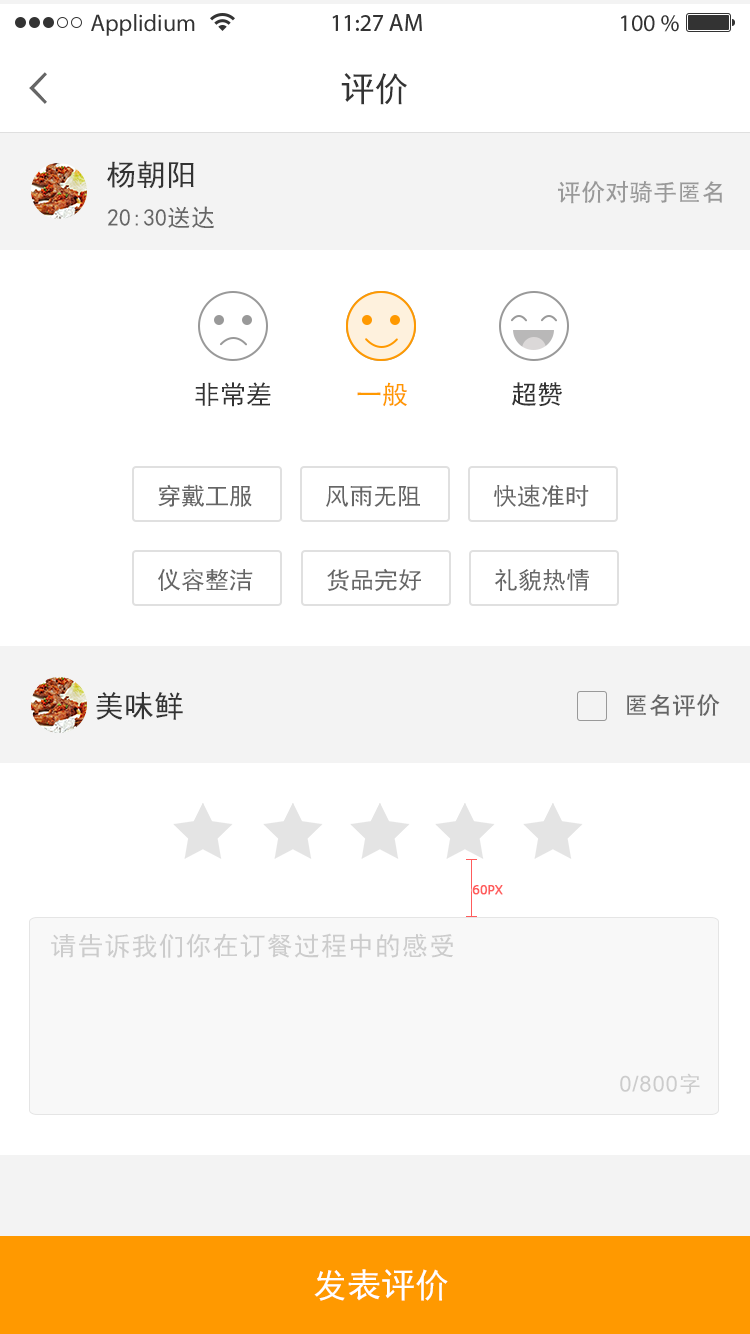
<style>
.page{position:relative;width:750px;height:1334px;background:#ffffff}
.page>*{position:absolute;margin:0}
.t1{font:24px "MyriadPro-Regular";color:#333333}
.t2{font:34px "SimHei";color:#333333}
.t3{font:29.9px "SimHei";color:#333333}
.t4{font:24px "AdobeHeitiStd-Regular";color:#999999}
.t5{font:23.9px "SimHei";color:#666666}
.t6{font:26px "SimHei";color:#333333}
.t7{font:26px "SimHei";color:#ff9900}
.t8{font:24px "SimHei";color:#666666}
.t9{font:30px "SimHei";color:#333333}
.t10{font:24px "AdobeHeitiStd-Regular";color:#666666}
.t11{font:12px "Verdana";color:#ff5c5c;font-weight:bold}
.t12{font:26px "SimHei";letter-spacing:0.04em;color:#cccccc}
.t13{font:22px "ArialMT";letter-spacing:0.04em;color:#cccccc}
.t14{font:22px "SimHei";letter-spacing:0.04em;color:#cccccc}
.t15{font:34px "SimHei";color:#ffffff}
</style>
<div class="page">
<p class="t1" style="left:91px;top:14px;width:104px;height:22px">Applidium</p>
<p class="t1" style="left:332px;top:14px;width:90px;height:17px">11:27 AM</p>
<p class="t1" style="left:621px;top:15px;width:58px;height:17px">100 %</p>
<p class="t2" style="left:341px;top:73px;width:66px;height:32px">评价</p>
<p class="t3" style="left:107px;top:161px;width:87px;height:28px">杨朝阳</p>
<p class="t4" style="left:558px;top:180px;width:164px;height:24px">评价对骑手匿名</p>
<p class="t5" style="left:107px;top:206px;width:107px;height:22px">20:30送达</p>
<p class="t6" style="left:195px;top:382px;width:76px;height:25px">非常差</p>
<p class="t7" style="left:357px;top:382px;width:50px;height:25px">一般</p>
<p class="t6" style="left:511px;top:382px;width:51px;height:25px">超赞</p>
<p class="t8" style="left:158px;top:484px;width:94px;height:23px">穿戴工服</p>
<p class="t8" style="left:326px;top:486px;width:94px;height:21px">风雨无阻</p>
<p class="t8" style="left:493px;top:484px;width:96px;height:23px">快速准时</p>
<p class="t8" style="left:158px;top:568px;width:95px;height:23px">仪容整洁</p>
<p class="t8" style="left:327px;top:568px;width:94px;height:24px">货品完好</p>
<p class="t8" style="left:494px;top:568px;width:95px;height:23px">礼貌热情</p>
<p class="t9" style="left:96px;top:692px;width:87px;height:28px">美味鲜</p>
<p class="t10" style="left:627px;top:693px;width:93px;height:24px">匿名评价</p>
<p class="t11" style="left:472px;top:885px;width:31px;height:10px">60PX</p>
<p class="t12" style="left:51px;top:933px;width:402px;height:25px">请告诉我们你在订餐过程中的感受</p>
<p class="t13" style="left:620px;top:1073px;width:80px;height:21px">0/800<span class="t14">字</span></p>
<p class="t15" style="left:314px;top:1269px;width:134px;height:32px">发表评价</p>
</div>
